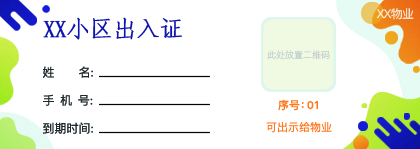
<style>
.page{position:relative;width:420px;height:149px;background:#ffffff}
.page>*{position:absolute;margin:0}
.t1{font:24px "FangSong";letter-spacing:-0.05em;color:#0e13ae;font-weight:bold}
.t2{font:12px "PingFang-SC-Medium";letter-spacing:-0.05em;color:#fdf2e8}
.t3{font:9px "PingFang-SC-Regular";color:#becdcf}
.t4{font:12px "PingFang-SC-Medium";color:#21282b}
.t5{font:11px "PingFang-SC-Bold";color:#ff7519}
.t6{font:11px "PingFang-SC-Medium";color:#ff7519}
</style>
<div class="page">
<p class="t1" style="left:43px;top:17px;width:139px;height:23px">XX小区出入证</p>
<p class="t2" style="left:376px;top:8px;width:38px;height:12px">XX物业</p>
<p class="t3" style="left:267px;top:50px;width:63px;height:9px">此处放置二维码</p>
<p class="t4" style="left:43px;top:66px;width:50px;height:12px">姓      名:</p>
<p class="t4" style="left:43px;top:94px;width:50px;height:12px">手 机 号:</p>
<p class="t5" style="left:278px;top:99px;width:40px;height:12px">序号：01</p>
<p class="t4" style="left:43px;top:122px;width:50px;height:12px">到期时间:</p>
<p class="t6" style="left:266px;top:122px;width:66px;height:11px">可出示给物业</p>
</div>
